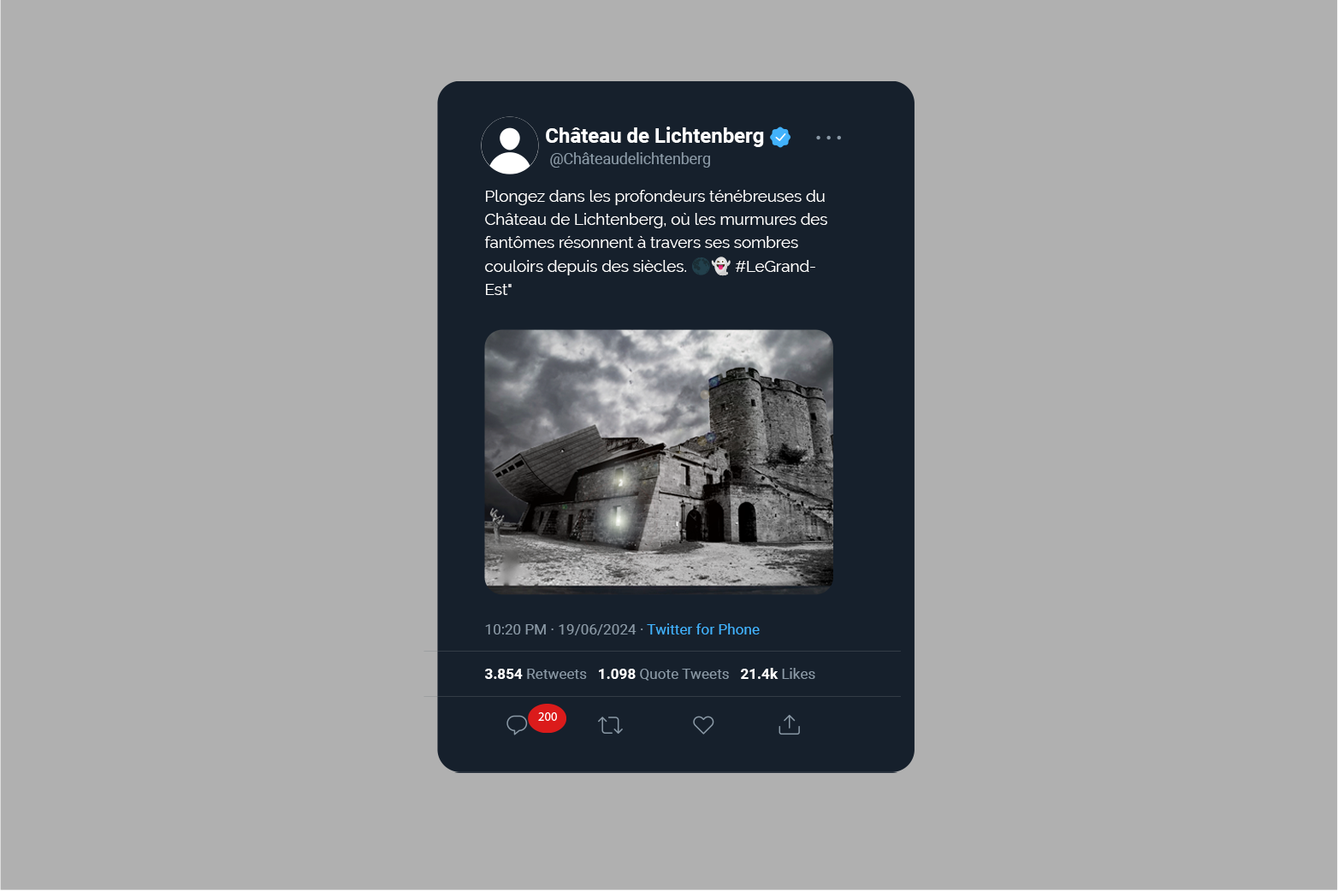
<style>
.page{position:relative;width:1338px;height:891px;background:#b0b0b0}
.page>*{position:absolute;margin:0}
.t1{font:20.5px "Roboto-Bold";color:#ffffff}
.t2{font:15.1px "Roboto-Regular";color:#8a99a6}
.t3{font:16px/23.3px "Raleway-Regular";color:#ffffff}
.t4{font:16px/23.3px "NotoColorEmoji-SVG";color:#ffffff}
.t5{font:14.7px "Roboto-Regular";color:#8a99a6}
.t6{font:14.7px "Roboto-Regular";color:#42b2fc}
.t7{font:14.7px "Roboto-Bold";color:#ffffff}
</style>
<div class="page">
<p class="t1" style="left:546px;top:127px;width:218px;height:20px">Château de Lichtenberg</p>
<p class="t2" style="left:550px;top:152px;width:160px;height:16px">@Châteaudelichtenberg</p>
<p class="t3" style="left:484px;top:190px;width:343px;height:105px">Plongez dans les profondeurs ténébreuses du Château de Lichtenberg, où les murmures des fantômes résonnent à travers ses sombres couloirs depuis des siècles. <span class="t4">🌑👻</span> #LeGrandEst"</p>
<p class="t5" style="left:485px;top:624px;width:275px;height:12px">10:20 PM · 19/06/2024 · <span class="t6">Twitter for Phone</span></p>
<p class="t5" style="left:485px;top:668px;width:330px;height:13px"><span class="t7">3.854</span> Retweets   <span class="t7">1.098</span> Quote Tweets   <span class="t7">21.4k</span> Likes</p>
</div>
